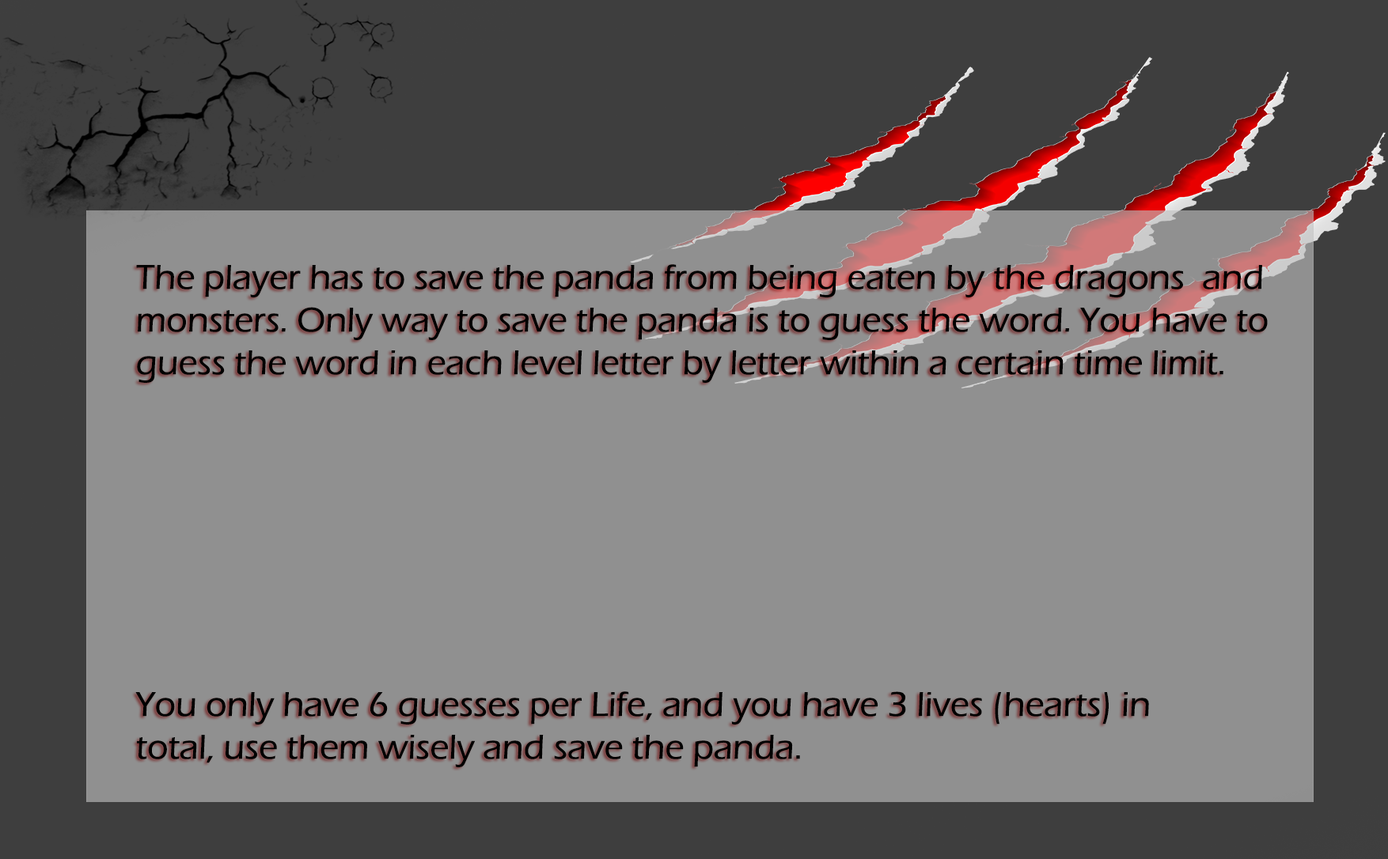
<style>
.page{position:relative;width:1388px;height:859px;background:#909090}
.page>*{position:absolute;margin:0}
.t1{font:35.6px "ErasITC-Medium";color:#000000}
</style>
<div class="page">
<p class="t1" style="left:135px;top:264px;width:1133px;height:503px">The player has to save the panda from being eaten by the dragons  and <br>monsters. Only way to save the panda is to guess the word. You have to <br>guess the word in each level letter by letter within a certain time limit.<br><br><br><br><br><br><br><br>You only have 6 guesses per Life, and you have 3 lives (hearts) in <br>total, use them wisely and save the panda.</p>
</div>
